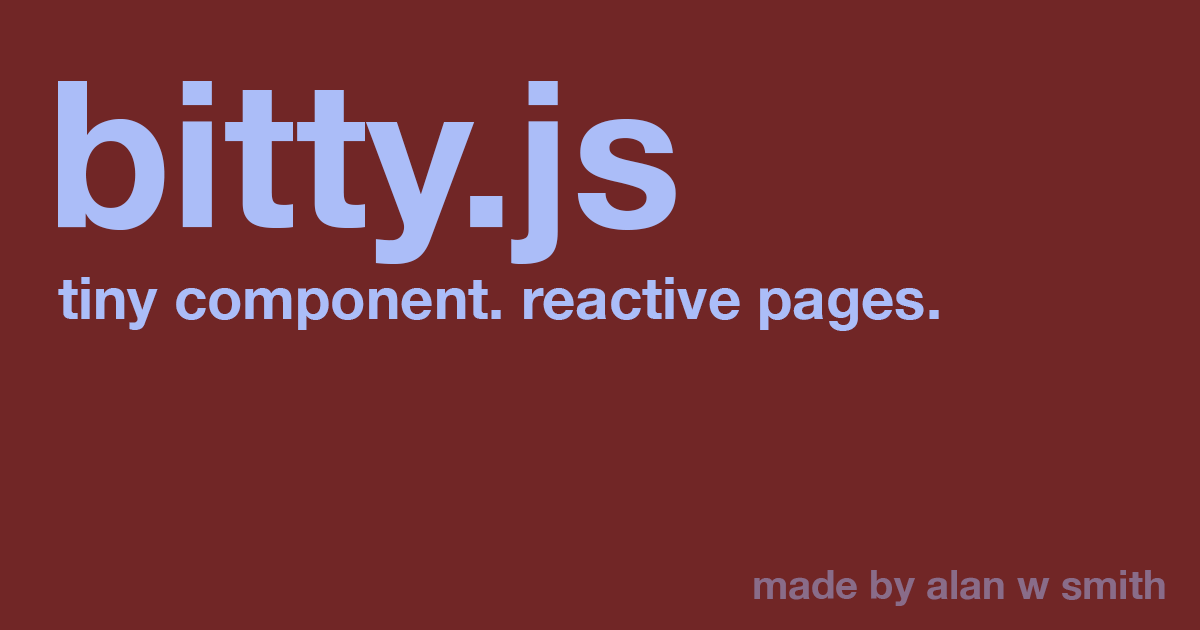
<style>
.page{position:relative;width:1200px;height:630px;background:#712626}
.page>*{position:absolute;margin:0}
.t1{font:204px "HelveticaNeue-Bold";color:#abbdf8}
.t2{font:58px "HelveticaNeue-Bold";color:#abbdf8}
.t3{font:40px "HelveticaNeue-Bold";color:#896c89}
</style>
<div class="page">
<p class="t1" style="left:58px;top:81px;width:618px;height:183px">bitty.js</p>
<p class="t2" style="left:58px;top:277px;width:881px;height:54px">tiny component. reactive pages.</p>
<p class="t3" style="left:754px;top:570px;width:411px;height:36px">made by alan w smith</p>
</div>
